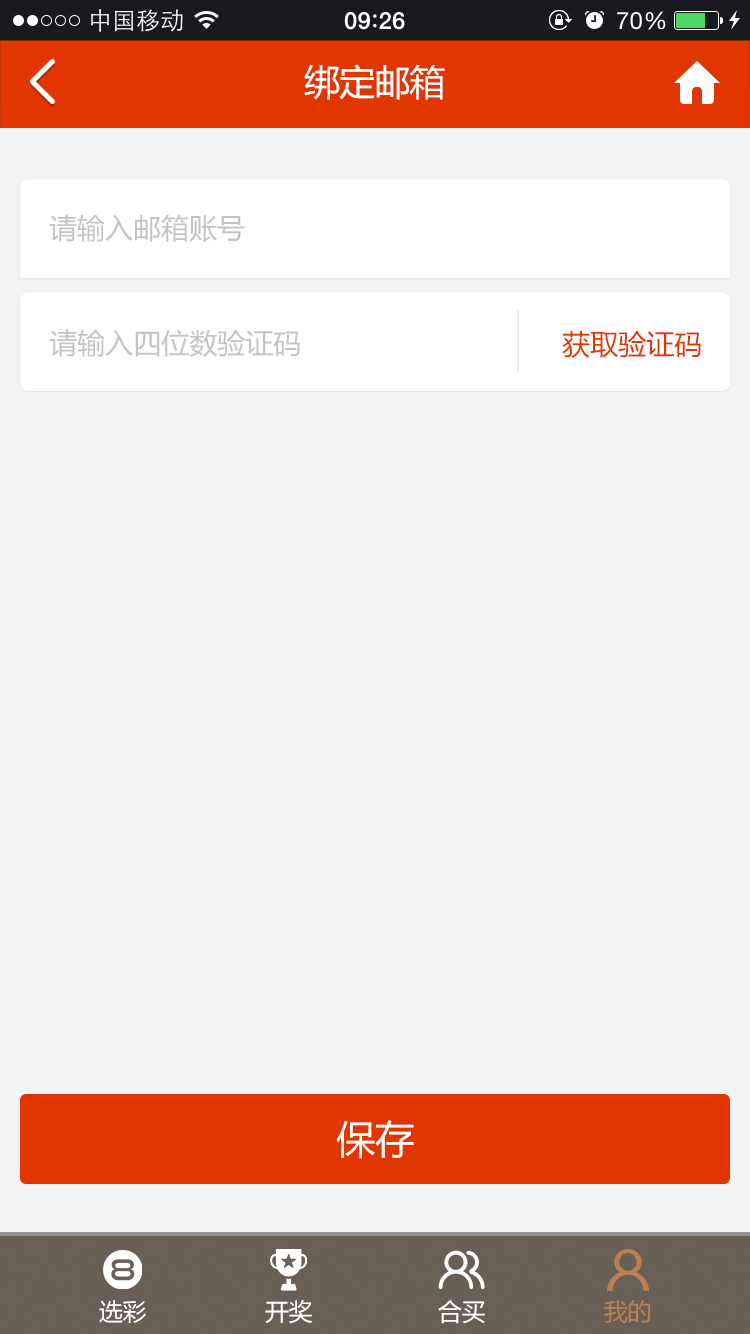
<style>
.page{position:relative;width:750px;height:1334px;background:#f2f3f5}
.page>*{position:absolute;margin:0}
.t1{font:36px "MicrosoftYaHei";letter-spacing:-0.025em;color:#ffffff}
.t2{font:28px "MicrosoftYaHei";color:#c4c4c4}
.t3{font:28px "MicrosoftYaHei";color:#e23600}
.t4{font:39px "MicrosoftYaHei";color:#ffffff}
.t5{font:24px "MicrosoftYaHei";letter-spacing:-0.025em;color:#ffffff}
.t6{font:24px "MicrosoftYaHei";letter-spacing:-0.025em;color:#bc7e53}
</style>
<div class="page">
<p class="t1" style="left:304px;top:64px;width:141px;height:36px">绑定邮箱</p>
<p class="t2" style="left:49px;top:214px;width:196px;height:28px">请输入邮箱账号</p>
<p class="t2" style="left:49px;top:329px;width:251px;height:28px">请输入四位数验证码</p>
<p class="t3" style="left:562px;top:330px;width:139px;height:28px">获取验证码</p>
<p class="t4" style="left:336px;top:1120px;width:78px;height:39px">保存</p>
<p class="t5" style="left:99px;top:1300px;width:47px;height:23px">选彩</p>
<p class="t5" style="left:265px;top:1300px;width:48px;height:24px">开奖</p>
<p class="t5" style="left:438px;top:1300px;width:47px;height:24px">合买</p>
<p class="t6" style="left:604px;top:1300px;width:47px;height:23px">我的</p>
</div>
